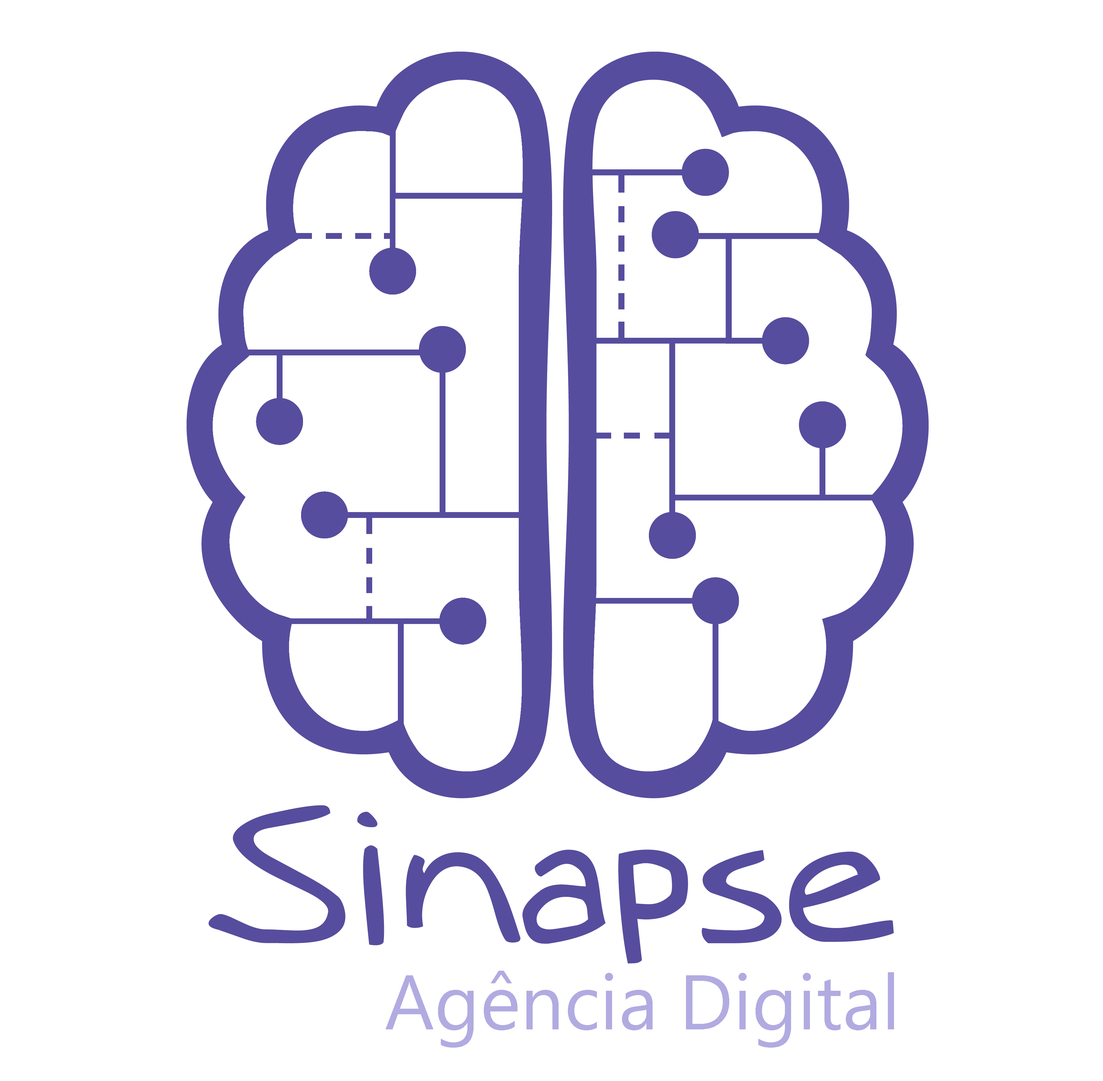
<style>
.page{position:relative;width:1103px;height:1081px;background:#ffffff}
.page>*{position:absolute;margin:0}
.t1{font:180.3px "Augie";color:#564d9e}
.t2{font:77.3px "SegoeUIHistoric";color:#b1abe1}
</style>
<div class="page">
<p class="t1" style="left:208px;top:805px;width:686px;height:159px">Sinapse</p>
<p class="t2" style="left:385px;top:971px;width:509px;height:77px">Agência Digital</p>
</div>
